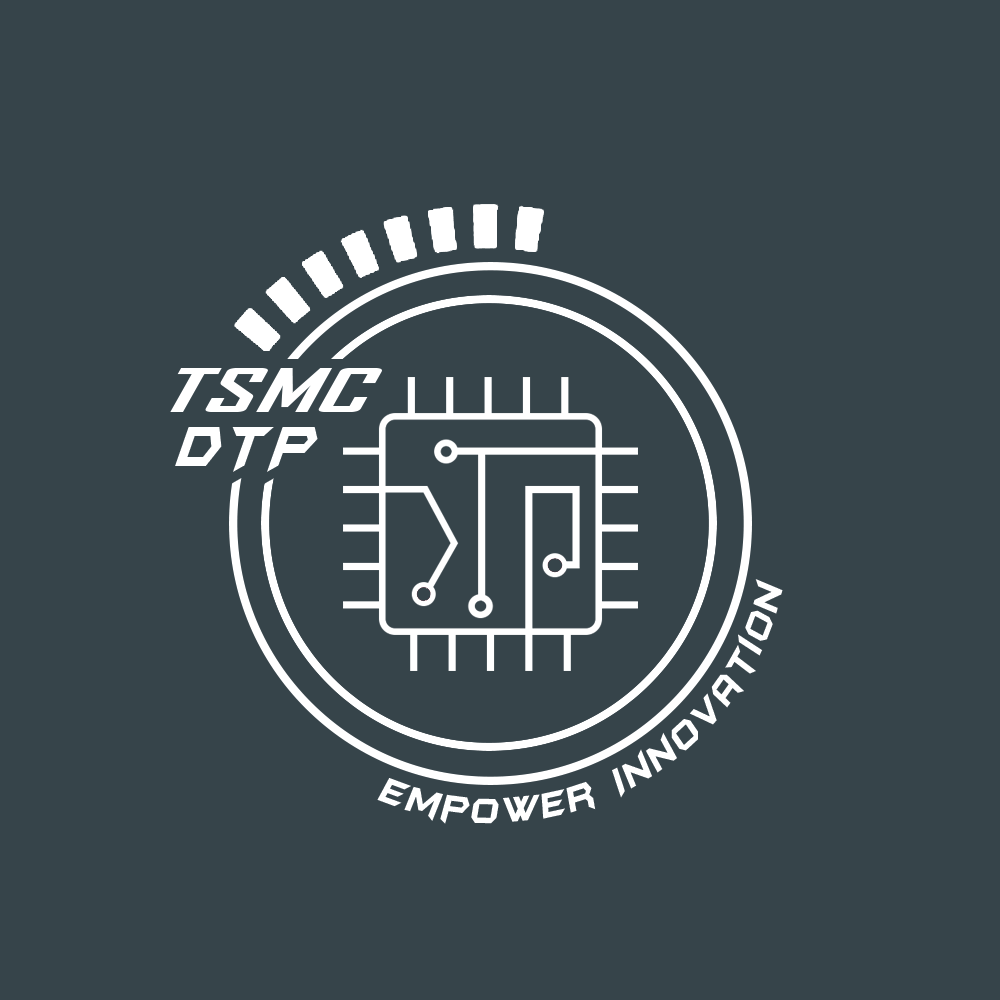
<style>
.page{position:relative;width:1000px;height:1000px;background:#36444a}
.page>*{position:absolute;margin:0}
.t1{font:59.8px "AgencyFB-Bold";letter-spacing:0.005em;color:#ffffff;font-style:italic;scale:1.86 1}
.t2{font:66.7px "BatmanForeverAlternate";letter-spacing:0.1em;color:#ffffff;font-style:italic;scale:0.78 1}
.t3{font:66.7px "BatmanForeverAlternate";color:#ffffff;font-style:italic;scale:0.78 1}
.t4{font:41.7px "BatmanForeverAlternate";letter-spacing:0.1em;color:#ffffff;font-style:italic;scale:0.8 1}
</style>
<div class="page">
<p class="t1" style="left:170px;top:368px;width:212px;height:44px">TSMC</p>
<p class="t2" style="left:175px;top:427px;width:143px;height:45px"><span class="t3">D</span>TP</p>
<p class="t4" style="left:377px;top:579px;width:406px;height:245px;rotate:90deg">Empower Innovation</p>
</div>
